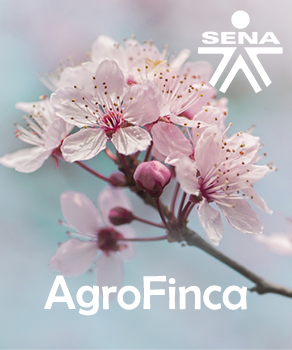
<style>
.page{position:relative;width:292px;height:350px}
.page>*{position:absolute;margin:0}
.t1{font:48px "BerlinSansFB-Reg";color:#ffffff}
</style>
<div class="page">
<p class="t1" style="left:44px;top:275px;width:203px;height:41px">AgroFinca</p>
</div>
